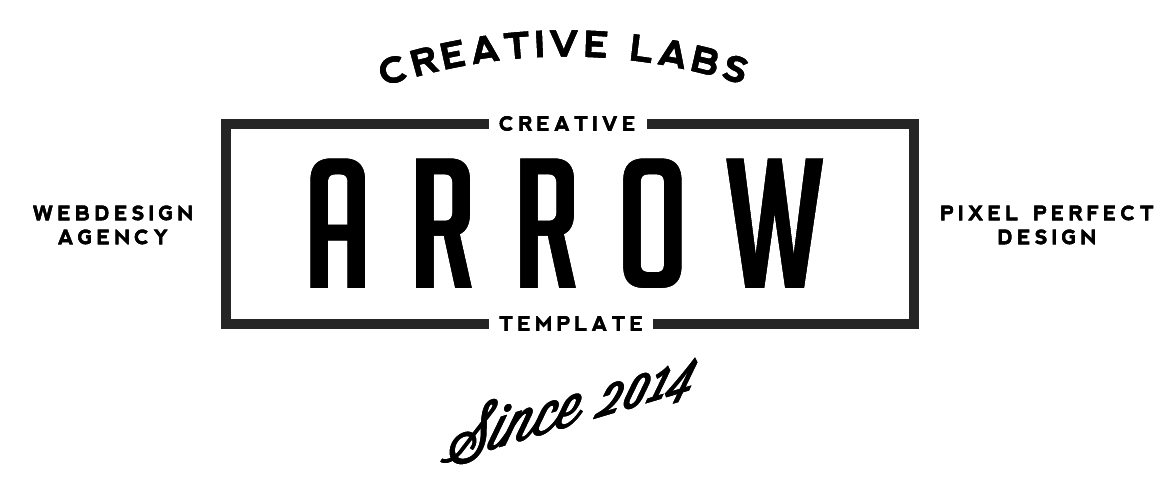
<style>
.page{position:relative;width:1158px;height:500px;background:#ffffff}
.page>*{position:absolute;margin:0}
.t1{font:36px "nevis-Bold";letter-spacing:0.1em;color:#000000;text-transform:uppercase}
.t2{font:20px "nevis-Bold";letter-spacing:0.2em;color:#000000;text-transform:uppercase}
.t3{font:180px "BigNoodleTitling";letter-spacing:0.2em;color:#000000;text-transform:uppercase}
.t4{font:60px "Wisdom-Script";color:#000000}
</style>
<div class="page">
<p class="t1" style="left:380px;top:30px;width:369px;height:53px">creative labs</p>
<p class="t2" style="left:499px;top:116px;width:136px;height:15px">creative</p>
<p class="t3" style="left:310px;top:158px;width:514px;height:130px">arrow</p>
<p class="t2" style="left:33px;top:205px;width:159px;height:40px;text-align:center">webdesign<br>agency</p>
<p class="t2" style="left:941px;top:205px;width:213px;height:40px;text-align:center">Pixel Perfect<br>Design</p>
<p class="t2" style="left:499px;top:316px;width:143px;height:15px">Template</p>
<p class="t4" style="left:440px;top:357px;width:258px;height:108px;rotate:-17deg">Since 2014</p>
</div>
